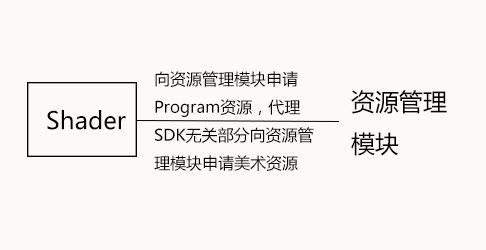
<style>
.page{position:relative;width:486px;height:250px;background:#fcf9f9}
.page>*{position:absolute;margin:0}
.t1{font:16px "MicrosoftYaHei";color:#020202}
.t2{font:24px "MicrosoftYaHei";color:#020202}
</style>
<div class="page">
<p class="t1" style="left:154px;top:71px;width:160px;height:100px">向资源管理模块申请Program资源，代理SDK无关部分向资源管理模块申请美术资源</p>
<p class="t2" style="left:351px;top:90px;width:96px;height:66px">资源管理<br>模块</p>
<p class="t2" style="left:47px;top:110px;width:79px;height:20px">Shader</p>
</div>
